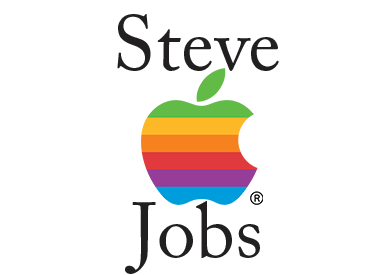
<style>
.page{position:relative;width:376px;height:275px;background:#ffffff}
.page>*{position:absolute;margin:0}
.t1{font:78px "ACaslonPro-Regular";color:#211f1f}
</style>
<div class="page">
<p class="t1" style="left:117px;top:14px;width:162px;height:260px;text-align:center">Steve<br><br>Jobs</p>
</div>
